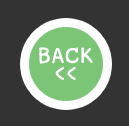
<style>
.page{position:relative;width:129px;height:126px;background:#333333}
.page>*{position:absolute;margin:0}
.t1{font:29.1px/17px "LayijiMaHaNiYomV1.5";letter-spacing:0.01em;color:#ffffff;font-weight:bold}
</style>
<div class="page">
<p class="t1" style="left:39px;top:47px;width:54px;height:33px;text-align:center">BACK<br>&lt;&lt;</p>
</div>
